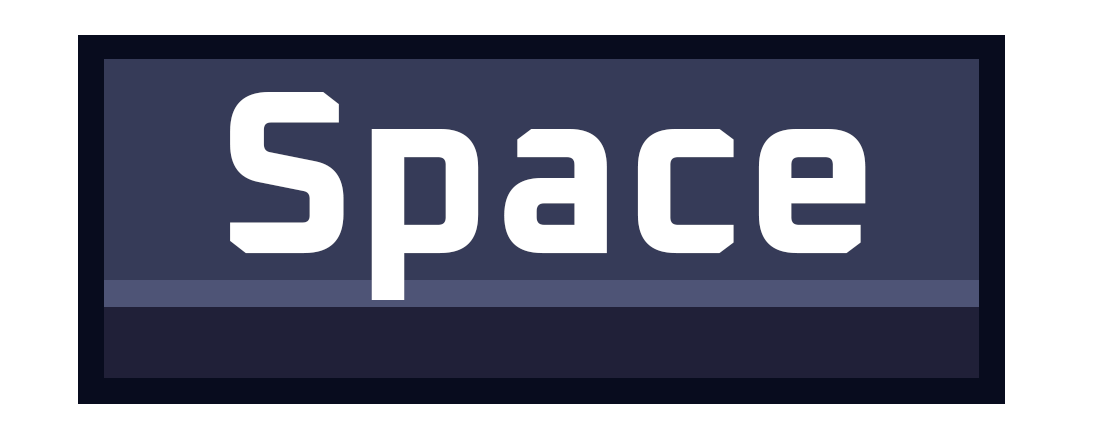
<style>
.page{position:relative;width:1098px;height:428px;background:#ffffff}
.page>*{position:absolute;margin:0}
.t1{font:234.3px "Oxanium-Bold";color:#ffffff}
</style>
<div class="page">
<p class="t1" style="left:230px;top:92px;width:636px;height:208px">Space</p>
</div>
